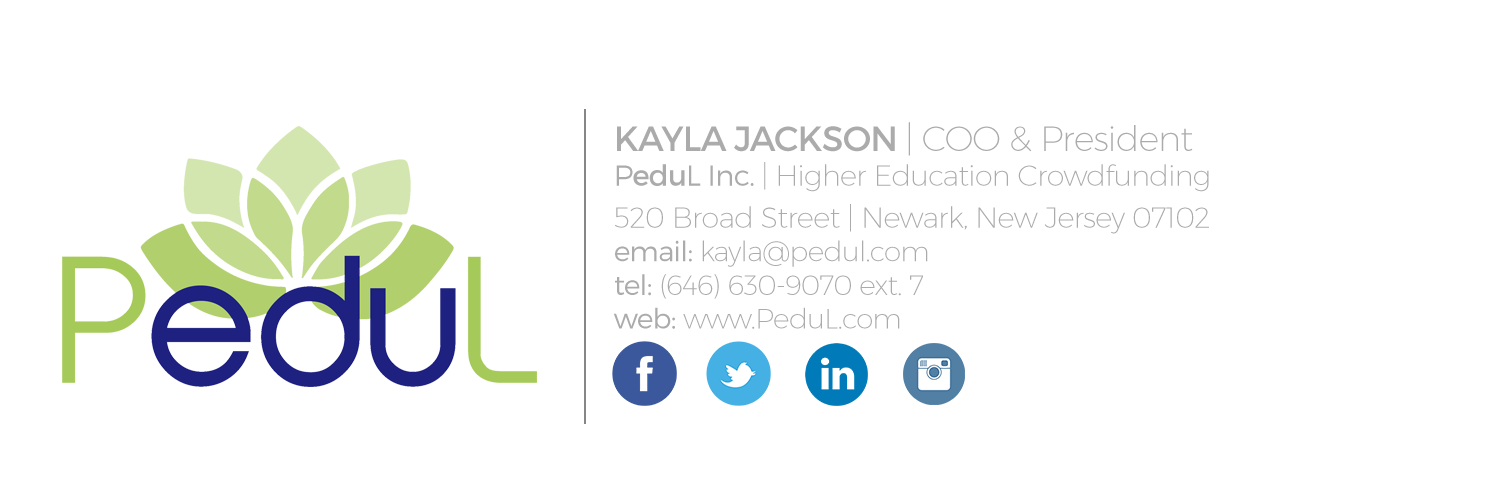
<style>
.page{position:relative;width:1500px;height:500px;background:#ffffff}
.page>*{position:absolute;margin:0}
.t1{font:29px "Montserrat-UltraLight";letter-spacing:-0.025em;color:#ababab}
.t2{font:35px "Montserrat-Regular";letter-spacing:-0.025em;color:#ababab}
.t3{font:35px "Montserrat-UltraLight";letter-spacing:-0.025em;color:#ababab}
.t4{font:29px "Montserrat-Light";letter-spacing:-0.025em;color:#ababab}
.t5{font:29px "Montserrat-Regular";letter-spacing:-0.025em;color:#ababab}
.t6{font:28px "Montserrat-Light";letter-spacing:-0.025em;color:#ababab}
.t7{font:28px "Montserrat-UltraLight";letter-spacing:-0.025em;color:#ababab}
</style>
<div class="page">
<p class="t1" style="left:613px;top:122px;width:596px;height:207px"><span class="t2">KAYLA JACKSON </span><span class="t3">| COO &amp; President<br></span><span class="t4">P</span><span class="t5">edu</span><span class="t4">L Inc. </span>| Higher Education Crowdfunding<br>520 Broad Street | Newark, New Jersey 07102 <br><span class="t6">email:</span><span class="t7"> kayla@pedul.com<br></span><span class="t6">tel:</span><span class="t7"> (646) 630-9070 ext. 7<br></span><span class="t6">web:</span><span class="t7"> www.PeduL.com</span></p>
</div>
